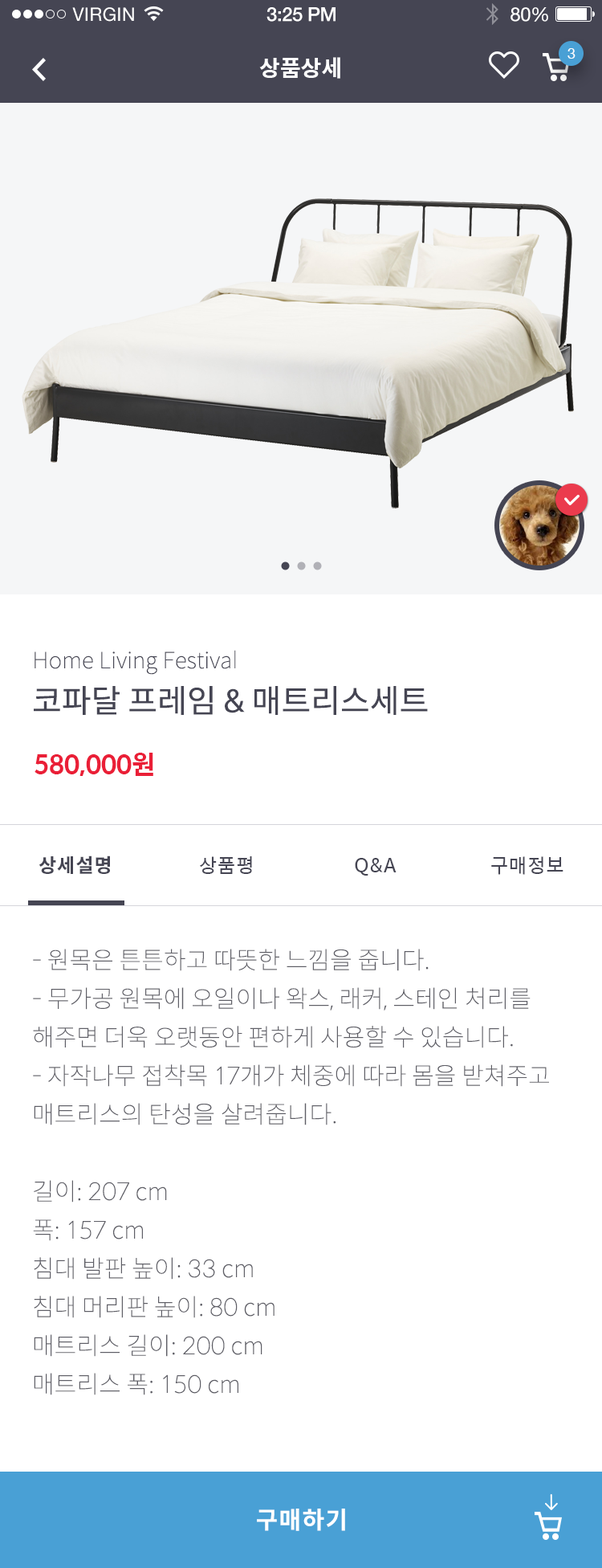
<style>
.page{position:relative;width:602px;height:1568px;background:#ffffff}
.page>*{position:absolute;margin:0}
.t1{font:18.5px "HelveticaNeue";letter-spacing:0.02em;color:#ffffff}
.t2{font:19.3px "HelveticaNeue-Medium";letter-spacing:-0.02em;color:#ffffff}
.t3{font:19.3px "HelveticaNeue";letter-spacing:-0.02em;color:#ffffff}
.t4{font:14.5px "HelveticaNeue";color:#ffffff}
.t5{font:22.5px "SpoqaHanSans-Bold";color:#ffffff}
.t6{font:22.5px "SpoqaHanSans-Thin";color:#454553}
.t7{font:32.1px "SpoqaHanSans-Regular";color:#454553}
.t8{font:25.7px "SpoqaHanSans-Bold";color:#ea1f37}
.t9{font:19.3px "SpoqaHanSans-Bold";letter-spacing:0.045em;color:#454553}
.t10{font:19.3px "SpoqaHanSans-Regular";letter-spacing:0.045em;color:#454553}
.t11{font:24.1px/38.6px "SpoqaHanSans-Thin";letter-spacing:0.003em;color:#5e5e66}
.t12{font:24.1px "SpoqaHanSans-Bold";letter-spacing:0.045em;color:#ffffff}
</style>
<div class="page">
<p class="t1" style="left:72px;top:7px;width:62px;height:15px">VIRGIN</p>
<p class="t2" style="left:267px;top:7px;width:69px;height:15px">3:25 PM</p>
<p class="t3" style="left:511px;top:7px;width:38px;height:15px">80%</p>
<p class="t4" style="left:568px;top:48px;width:8px;height:11px">3</p>
<p class="t5" style="left:259px;top:57px;width:82px;height:22px">상품상세</p>
<p class="t6" style="left:35px;top:650px;width:201px;height:25px">Home Living Festival</p>
<p class="t7" style="left:34px;top:686px;width:394px;height:29px">코파달 프레임 &amp; 매트리스세트</p>
<p class="t8" style="left:35px;top:753px;width:118px;height:23px">580,000원</p>
<p class="t9" style="left:39px;top:855px;width:71px;height:19px">상세설명</p>
<p class="t10" style="left:200px;top:856px;width:52px;height:18px">상품평</p>
<p class="t10" style="left:355px;top:858px;width:42px;height:18px">Q&amp;A</p>
<p class="t10" style="left:492px;top:856px;width:72px;height:19px">구매정보</p>
<p class="t11" style="left:33px;top:949px;width:516px;height:446px">- 원목은 튼튼하고 따뜻한 느낌을 줍니다.<br>- 무가공 원목에 오일이나 왁스, 래커, 스테인 처리를 해주면 더욱 오랫동안 편하게 사용할 수 있습니다.<br>- 자작나무 접착목 17개가 체중에 따라 몸을 받쳐주고 매트리스의 탄성을 살려줍니다.<br><br>길이: 207 cm<br>폭: 157 cm<br>침대 발판 높이: 33 cm<br>침대 머리판 높이: 80 cm<br>매트리스 길이: 200 cm<br>매트리스 폭: 150 cm</p>
<p class="t12" style="left:257px;top:1509px;width:88px;height:22px">구매하기</p>
</div>
